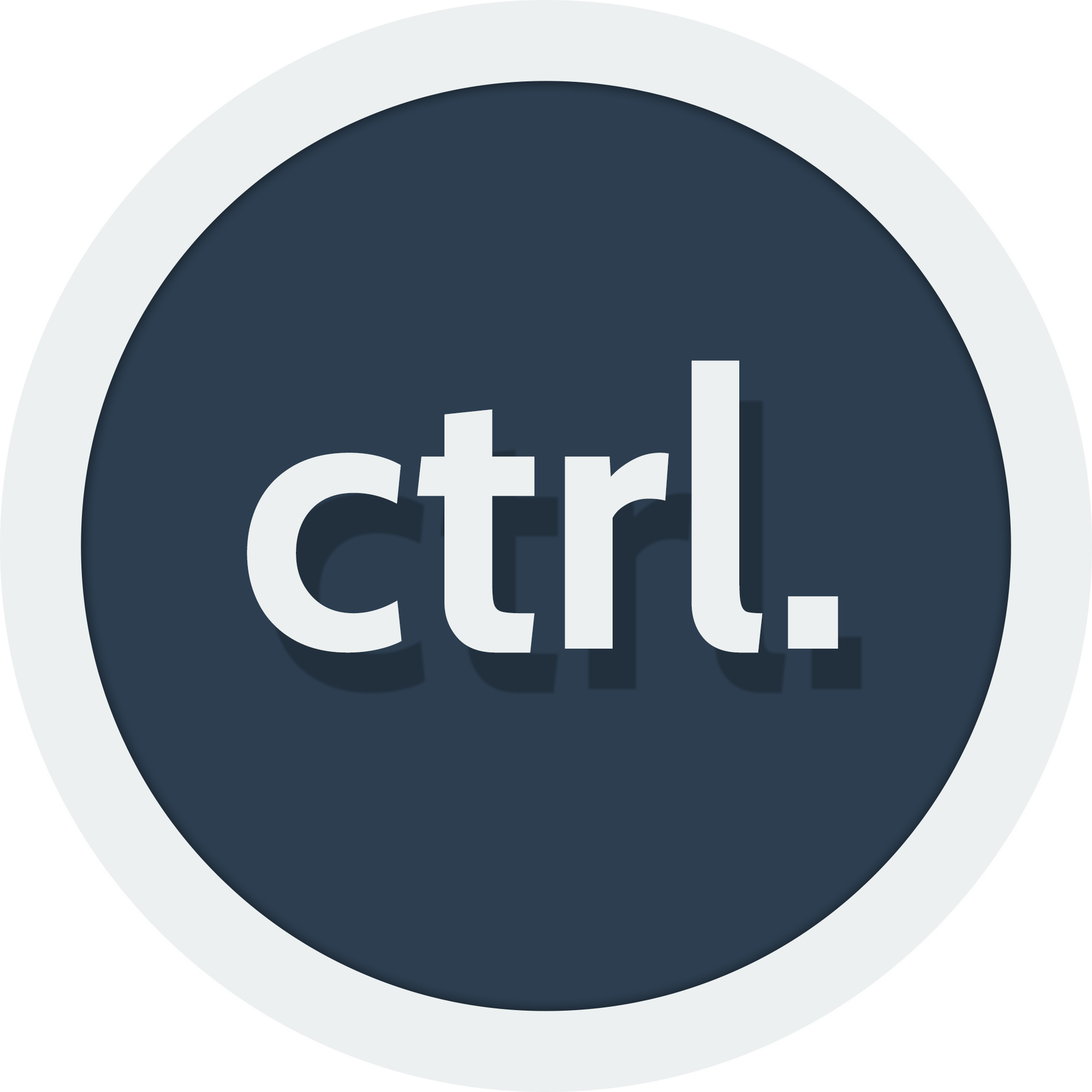
<style>
.page{position:relative;width:1092px;height:1092px;background:#2c3e50}
.page>*{position:absolute;margin:0}
.t1{font:383.9px "Cabin-Bold";color:#ecf0f1}
</style>
<div class="page">
<p class="t1" style="left:247px;top:360px;width:591px;height:293px">ctrl.</p>
</div>
